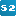
<style>
.page{position:relative;width:16px;height:16px}
.page>*{position:absolute;margin:0}
.t1{font:8px "Early-GameBoy";color:#ffffff}
</style>
<div class="page">
<p class="t1" style="left:1px;top:5px;width:14px;height:6px">S2</p>
</div>
